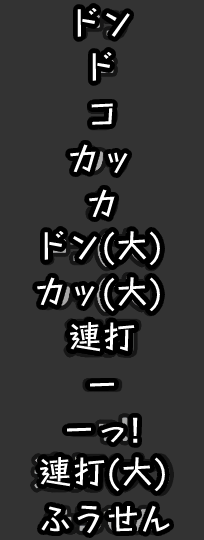
<style>
.page{position:relative;width:204px;height:540px;background:#333333}
.page>*{position:absolute;margin:0}
.t1{font:34px "Stick-Regular";color:#ffffff}
</style>
<div class="page">
<p class="t1" style="left:77px;top:7px;width:53px;height:30px">ドン</p>
<p class="t1" style="left:92px;top:51px;width:20px;height:30px">ド</p>
<p class="t1" style="left:91px;top:103px;width:22px;height:22px">コ</p>
<p class="t1" style="left:70px;top:144px;width:58px;height:30px">カッ</p>
<p class="t1" style="left:89px;top:189px;width:26px;height:29px">カ</p>
<p class="t1" style="left:44px;top:230px;width:116px;height:36px">ドン(大)</p>
<p class="t1" style="left:37px;top:277px;width:123px;height:35px">カッ(大)</p>
<p class="t1" style="left:69px;top:321px;width:66px;height:31px">連打</p>
<p class="t1" style="left:69px;top:321px;width:66px;height:31px">連打</p>
<p class="t1" style="left:89px;top:382px;width:26px;height:5px">ー</p>
<p class="t1" style="left:66px;top:417px;width:72px;height:26px">ーっ!</p>
<p class="t1" style="left:39px;top:456px;width:126px;height:36px">連打(大)</p>
<p class="t1" style="left:41px;top:505px;width:129px;height:29px">ふうせん</p>
</div>
